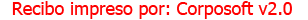
<style>
.page{position:relative;width:308px;height:20px;background:#ffffff}
.page>*{position:absolute;margin:0}
.t1{font:18px "Tahoma";color:#fe0000}
</style>
<div class="page">
<p class="t1" style="left:12px;top:1px;width:280px;height:18px">Recibo impreso por: Corposoft v2.0</p>
</div>
